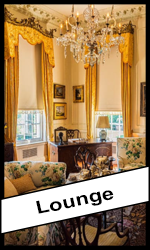
<style>
.page{position:relative;width:150px;height:250px}
.page>*{position:absolute;margin:0}
.t1{font:18px "Arial-BoldMT";color:#000000;scale:1.22 1}
</style>
<div class="page">
<p class="t1" style="left:36px;top:190px;width:78px;height:24px;rotate:-12deg">Lounge</p>
</div>
